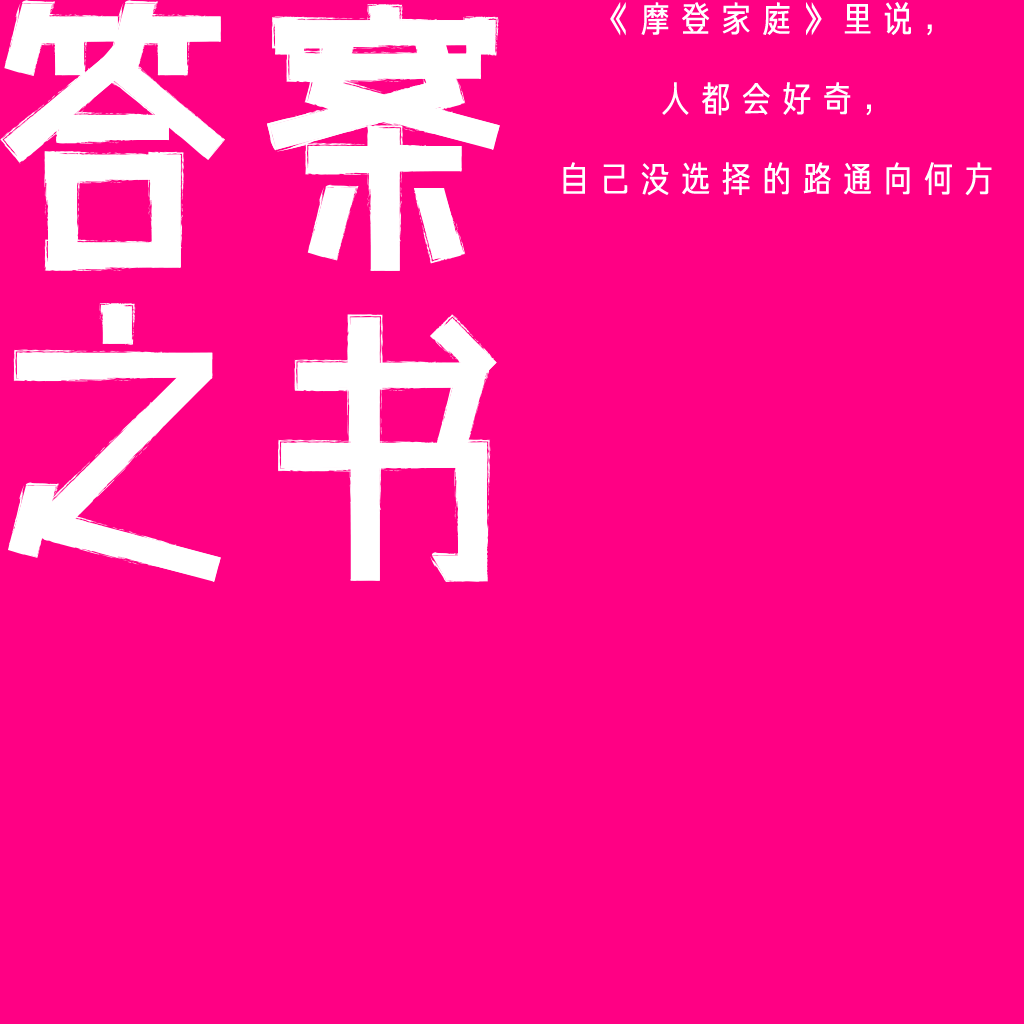
<style>
.page{position:relative;width:1024px;height:1024px;background:#ff0084}
.page>*{position:absolute;margin:0}
.t1{font:36px/80px "FZJUNH_ZHUNJW--GB1-0";letter-spacing:0.3em;color:#ffffff}
</style>
<div class="page">
<p class="t1" style="left:563px;top:2px;width:429px;height:194px;text-align:center">《摩登家庭》里说，<br>人都会好奇，<br>自己没选择的路通向何方</p>
</div>
